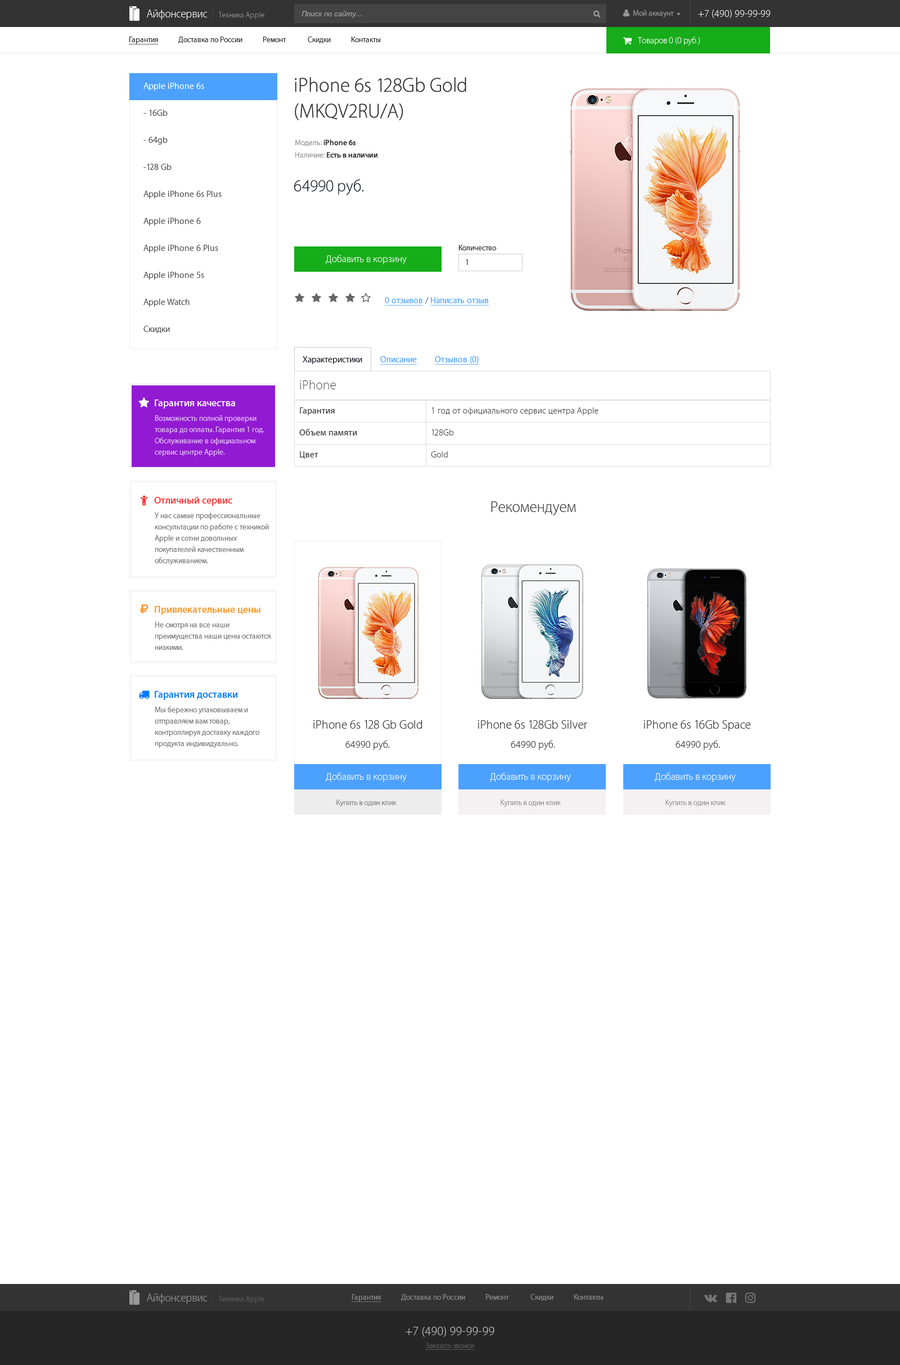
<style>
.page{position:relative;width:900px;height:1365px;background:#ffffff}
.page>*{position:absolute;margin:0}
.t1{font:7.3px "Arial-ItalicMT";color:#999999}
.t2{font:2.7px "ArialMT";color:#999999;scale:1.79 1}
.t3{font:10.1px "MyriadSetPro-Thin";color:#ffffff}
.t4{font:7.9px "MyriadSetPro-Text";color:#333333}
.t5{font:7.9px "MyriadSetPro-Text";color:#333333;text-decoration:underline}
.t6{font:9px "MyriadSetPro-Thin";color:#ffffff}
.t7{font:20.2px/25.8px "MyriadSetPro-Thin";color:#333333}
.t8{font:9px "MyriadSetPro-Text";color:#ffffff}
.t9{font:9px "MyriadSetPro-Text";color:#555555}
.t10{font:7.9px "MyriadSetPro-Semibold";color:#333333}
.t11{font:7.9px "MyriadSetPro-Text";color:#999999}
.t12{font:16.9px "MyriadSetPro-Thin";color:#20222f}
.t13{font:9px "MyriadSetPro-Text";color:#4ca1ff;text-decoration:underline}
.t14{font:9px "MyriadSetPro-Text";color:#666666}
.t15{font:9px "MyriadSetPro-Text";color:#20222f}
.t16{font:10.1px "MyriadSetPro-Semibold";color:#ffffff}
.t17{font:7.9px/11.2px "MyriadSetPro-Text";color:#e4c6f4}
.t18{font:10.1px "MyriadSetPro-Semibold";color:#f53737}
.t19{font:15.8px "MyriadSetPro-Thin";color:#333333}
.t20{font:7.9px/11.2px "MyriadSetPro-Text";color:#777777}
.t21{font:10.1px "MyriadSetPro-Semibold";color:#ff9320}
.t22{font:10.1px "MyriadSetPro-Semibold";color:#0079ff}
.t23{font:12.4px "MyriadSetPro-Thin";color:#333333}
.t24{font:10.1px "MyriadSetPro-Thin";color:#333333}
.t25{font:7.9px "MyriadSetPro-Thin";color:#666666}
.t26{font:7.9px "MyriadSetPro-Thin";color:#777777}
.t27{font:7.9px "MyriadSetPro-Text";color:#8f8f8f}
.t28{font:7.9px "MyriadSetPro-Text";color:#8f8f8f;text-decoration:underline}
.t29{font:12.4px "MyriadSetPro-Thin";color:#c8c8c8}
.t30{font:7.9px "MyriadSetPro-Thin";color:#666666;text-decoration:underline}
</style>
<div class="page">
<p class="t1" style="left:302px;top:11px;width:60px;height:7px">Поиск по сайту...</p>
<p class="t2" style="left:677px;top:13px;width:4px;height:2px">▼</p>
<p class="t3" style="left:698px;top:10px;width:73px;height:8px">+7 (490) 99-99-99</p>
<p class="t4" style="left:129px;top:37px;width:251px;height:7px"><span class="t5">Гарантия</span>            Доставка по России            Ремонт             Скидки            Контакты</p>
<p class="t6" style="left:637px;top:37px;width:63px;height:9px">Товаров 0 (0 руб.)</p>
<p class="t7" style="left:295px;top:77px;width:171px;height:43px">iPhone 6s 128Gb Gold<br>(MKQV2RU/A)</p>
<p class="t8" style="left:143px;top:83px;width:61px;height:8px">Apple iPhone 6s</p>
<p class="t9" style="left:143px;top:110px;width:25px;height:6px">- 16Gb</p>
<p class="t9" style="left:143px;top:137px;width:25px;height:8px">- 64gb</p>
<p class="t10" style="left:295px;top:140px;width:61px;height:7px"><span class="t11">Модель: </span>iPhone 6s</p>
<p class="t10" style="left:295px;top:152px;width:82px;height:6px"><span class="t11">Наличие: </span>Есть в наличии</p>
<p class="t9" style="left:143px;top:164px;width:29px;height:6px">-128 Gb</p>
<p class="t12" style="left:294px;top:179px;width:70px;height:16px">64990 руб.</p>
<p class="t9" style="left:143px;top:191px;width:79px;height:8px">Apple iPhone 6s Plus</p>
<p class="t9" style="left:143px;top:218px;width:58px;height:8px">Apple iPhone 6</p>
<p class="t9" style="left:143px;top:245px;width:75px;height:8px">Apple iPhone 6 Plus</p>
<p class="t4" style="left:458px;top:245px;width:39px;height:5px">Количество</p>
<p class="t3" style="left:326px;top:254px;width:81px;height:10px">Добавить в корзину</p>
<p class="t4" style="left:466px;top:259px;width:2px;height:6px">1</p>
<p class="t9" style="left:143px;top:272px;width:61px;height:8px">Apple iPhone 5s</p>
<p class="t9" style="left:143px;top:299px;width:47px;height:8px">Apple Watch</p>
<p class="t13" style="left:385px;top:297px;width:104px;height:8px">0 отзывов<span class="t14"> / </span>Написать отзыв</p>
<p class="t9" style="left:143px;top:326px;width:27px;height:7px">Скидки</p>
<p class="t13" style="left:303px;top:356px;width:176px;height:8px"><span class="t15">Характеристики        </span>Описание        Отзывов (0)</p>
<p class="t16" style="left:155px;top:399px;width:80px;height:9px">Гарантия качества</p>
<p class="t17" style="left:155px;top:415px;width:109px;height:41px">Возможность полной проверки товара до оплаты. Гарантия 1 год. Обслуживание в официальном сервис центре Apple.</p>
<p class="t18" style="left:154px;top:497px;width:78px;height:9px">Отличный сервис</p>
<p class="t19" style="left:491px;top:501px;width:85px;height:14px">Рекомендуем</p>
<p class="t20" style="left:154px;top:512px;width:115px;height:53px">У нас самые профессиональные консультации по работе с техникой Apple и сотни довольных покупателей качественным обслуживанием.</p>
<p class="t21" style="left:155px;top:606px;width:105px;height:9px">Привлекательные цены</p>
<p class="t20" style="left:155px;top:622px;width:116px;height:28px">Не смотря на все наши преимущества наши цены остаются низкими.</p>
<p class="t22" style="left:155px;top:691px;width:83px;height:9px">Гарантия доставки</p>
<p class="t20" style="left:155px;top:706px;width:105px;height:42px">Мы бережно упаковываем и отправляем вам товар, контроллируя доставку каждого продукта индивидуально.</p>
<p class="t23" style="left:313px;top:720px;width:109px;height:8px">iPhone 6s 128 Gb Gold</p>
<p class="t23" style="left:478px;top:720px;width:109px;height:8px">iPhone 6s 128Gb Silver</p>
<p class="t23" style="left:644px;top:720px;width:107px;height:11px">iPhone 6s 16Gb Space</p>
<p class="t24" style="left:345px;top:740px;width:45px;height:10px">64990 руб.</p>
<p class="t24" style="left:511px;top:740px;width:44px;height:10px">64990 pyб.</p>
<p class="t24" style="left:676px;top:740px;width:44px;height:10px">64990 pyб.</p>
<p class="t3" style="left:326px;top:772px;width:81px;height:10px">Добавить в корзину</p>
<p class="t3" style="left:490px;top:772px;width:81px;height:10px">Добавить в корзину</p>
<p class="t3" style="left:655px;top:772px;width:81px;height:10px">Добавить в корзину</p>
<p class="t25" style="left:336px;top:799px;width:61px;height:8px">Купить в один клик</p>
<p class="t26" style="left:501px;top:799px;width:60px;height:8px">Купить в один клик</p>
<p class="t26" style="left:665px;top:799px;width:61px;height:8px">Купить в один клик</p>
<p class="t27" style="left:352px;top:1294px;width:251px;height:8px"><span class="t28">Гарантия</span>            Доставка по России            Ремонт             Скидки            Контакты</p>
<p class="t29" style="left:406px;top:1326px;width:88px;height:10px">+7 (490) 99-99-99</p>
<p class="t30" style="left:425px;top:1342px;width:50px;height:7px">Заказать звонок</p>
</div>
